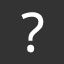
<style>
.page{position:relative;width:64px;height:64px;background:#333333}
.page>*{position:absolute;margin:0}
.t1{font:54px "NotoSansUI";color:#fefefe}
</style>
<div class="page">
<p class="t1" style="left:21px;top:12px;width:23px;height:41px">?</p>
</div>
